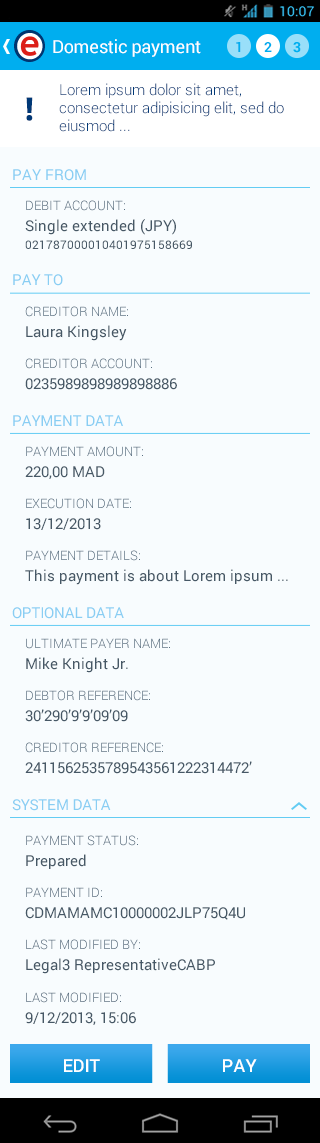
<style>
.page{position:relative;width:320px;height:1143px;background:#f8fcfe}
.page>*{position:absolute;margin:0}
.t1{font:18px "Roboto-Regular";letter-spacing:-0.015em;color:#ffffff}
.t2{font:14px "Roboto-Bold";color:#00adee}
.t3{font:15px/18px "Roboto-Light";color:#003876}
.t4{font:31px "OpenSans-Bold";color:#003876;font-weight:bold}
.t5{font:15px "Roboto-Regular";color:#89cef3}
.t6{font:12px/18px "Roboto-Regular";color:#465866}
.t7{font:13px/15.6px "Roboto-Light";color:#586e80}
.t8{font:15px/21px "Roboto-Regular";color:#465866}
.t9{font:15px "Roboto-Regular";letter-spacing:-0.015em;color:#89cef3}
.t10{font:13px/15.6px "Roboto-Light";color:#586f81}
.t11{font:13px/31.2px "Roboto-Light";color:#586f81}
.t12{font:15px/18px "Roboto-Regular";color:#465866}
.t13{font:13px/31.2px "Roboto-Light";color:#586e80}
.t14{font:13px/15.6px "Roboto-Light";color:#586d7f}
.t15{font:13px/31.2px "Roboto-Light";color:#586d7f}
.t16{font:18px "Roboto-Medium";color:#ffffff}
</style>
<div class="page">
<p class="t1" style="left:53px;top:39px;width:148px;height:18px">Domestic payment</p>
<p class="t2" style="left:236px;top:42px;width:5px;height:10px">1</p>
<p class="t2" style="left:264px;top:42px;width:8px;height:10px">2</p>
<p class="t3" style="left:59px;top:83px;width:225px;height:49px">Lorem ipsum dolor sit amet, consectetur adipisicing elit, sed do eiusmod ...</p>
<p class="t4" style="left:26px;top:97px;width:7px;height:24px">!</p>
<p class="t5" style="left:13px;top:169px;width:73px;height:12px">PAY FROM</p>
<p class="t6" style="left:25px;top:200px;width:167px;height:49px"><span class="t7">DEBIT ACCOUNT:<br></span><span class="t8">Single extended (JPY)<br></span>021787000010401975158669</p>
<p class="t9" style="left:13px;top:274px;width:50px;height:12px">PAY TO</p>
<p class="t8" style="left:25px;top:306px;width:152px;height:84px"><span class="t10">CREDITOR NAME:<br></span>Laura Kingsley<br><span class="t11">CREDITOR ACCOUNT:<br></span>0235989898989898886</p>
<p class="t9" style="left:13px;top:415px;width:110px;height:11px">PAYMENT DATA</p>
<p class="t8" style="left:25px;top:446px;width:263px;height:139px"><span class="t10">PAYMENT AMOUNT:<br></span>220,00 MAD<br><span class="t11">EXECUTION DATE:<br></span>13/12/2013<br><span class="t11">PAYMENT DETAILS:<br></span>This payment is about Lorem ipsum<span class="t12"> ...</span></p>
<p class="t9" style="left:12px;top:607px;width:112px;height:12px">OPTIONAL DATA</p>
<p class="t8" style="left:25px;top:638px;width:227px;height:136px"><span class="t7">ULTIMATE PAYER NAME:<br></span>Mike Knight Jr.<br><span class="t13">DEBTOR REFERENCE:<br></span>30’290’9’9’09’09<br><span class="t13">CREDITOR REFERENCE:<br></span>2411562535789543561222314472’</p>
<p class="t9" style="left:12px;top:799px;width:99px;height:12px">SYSTEM DATA</p>
<p class="t8" style="left:25px;top:835px;width:220px;height:190px"><span class="t14">PAYMENT STATUS:<br></span>Prepared<br><span class="t15">PAYMENT ID:<br></span>CDMAMAMC10000002JLP75Q4U<br><span class="t15">LAST MODIFIED BY:<br></span>Legal3 RepresentativeCABP<br><span class="t15">LAST MODIFIED:<br></span>9/12/2013, 15:06</p>
<p class="t16" style="left:64px;top:1059px;width:36px;height:13px">EDIT</p>
<p class="t16" style="left:223px;top:1059px;width:34px;height:13px">PAY</p>
</div>
